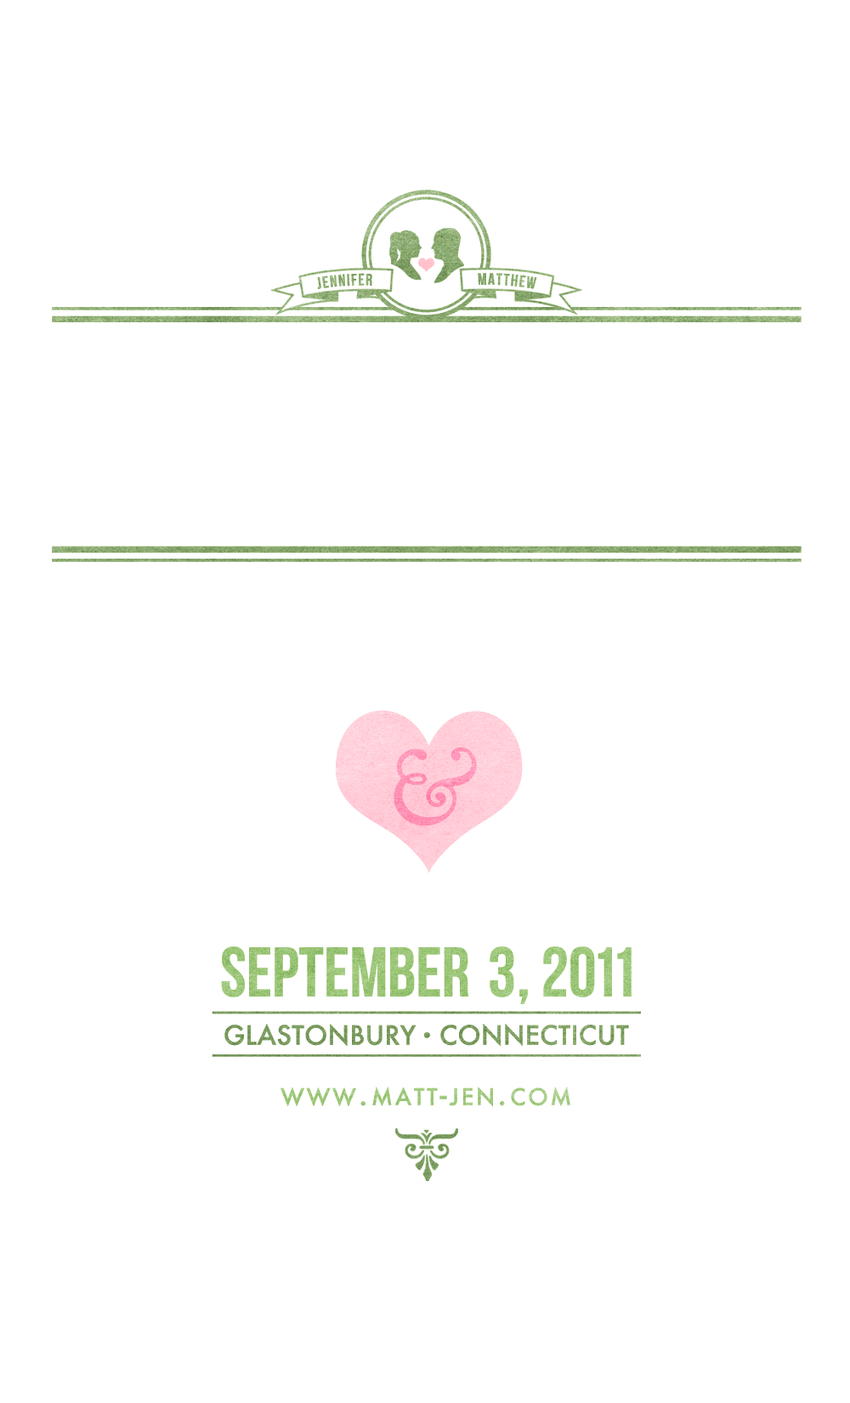
<style>
.page{position:relative;width:850px;height:1403px;background:#ffffff}
.page>*{position:absolute;margin:0}
.t1{font:23.2px "BebasNeue";letter-spacing:0.075em;color:#8dac73;font-variant:small-caps}
.t2{font:23.2px "BebasNeue";letter-spacing:0.075em;color:#8caa6f;font-variant:small-caps}
.t3{font:105.8px "GoudyBookletter1911";letter-spacing:0.075em;color:#ff93b7;font-variant:small-caps}
.t4{font:70.1px "BebasNeue";color:#9bc679}
.t5{font:36.8px "Futura-Medium";letter-spacing:0.01em;color:#7c9b62;font-variant:small-caps}
.t6{font:31.9px "Futura-Medium";letter-spacing:0.1em;color:#9bbc91;font-variant:small-caps}
</style>
<div class="page">
<p class="t1" style="left:317px;top:273px;width:55px;height:16px;rotate:-4deg">jennifer</p>
<p class="t2" style="left:478px;top:273px;width:59px;height:16px;rotate:4deg">matthew</p>
<p class="t3" style="left:394px;top:747px;width:83px;height:78px">&amp;</p>
<p class="t4" style="left:221px;top:946px;width:411px;height:58px">September 3, 2011</p>
<p class="t5" style="left:224px;top:1024px;width:405px;height:22px">glastonbury  connecticut</p>
<p class="t6" style="left:281px;top:1086px;width:289px;height:20px">www.matt-jen.com</p>
</div>
